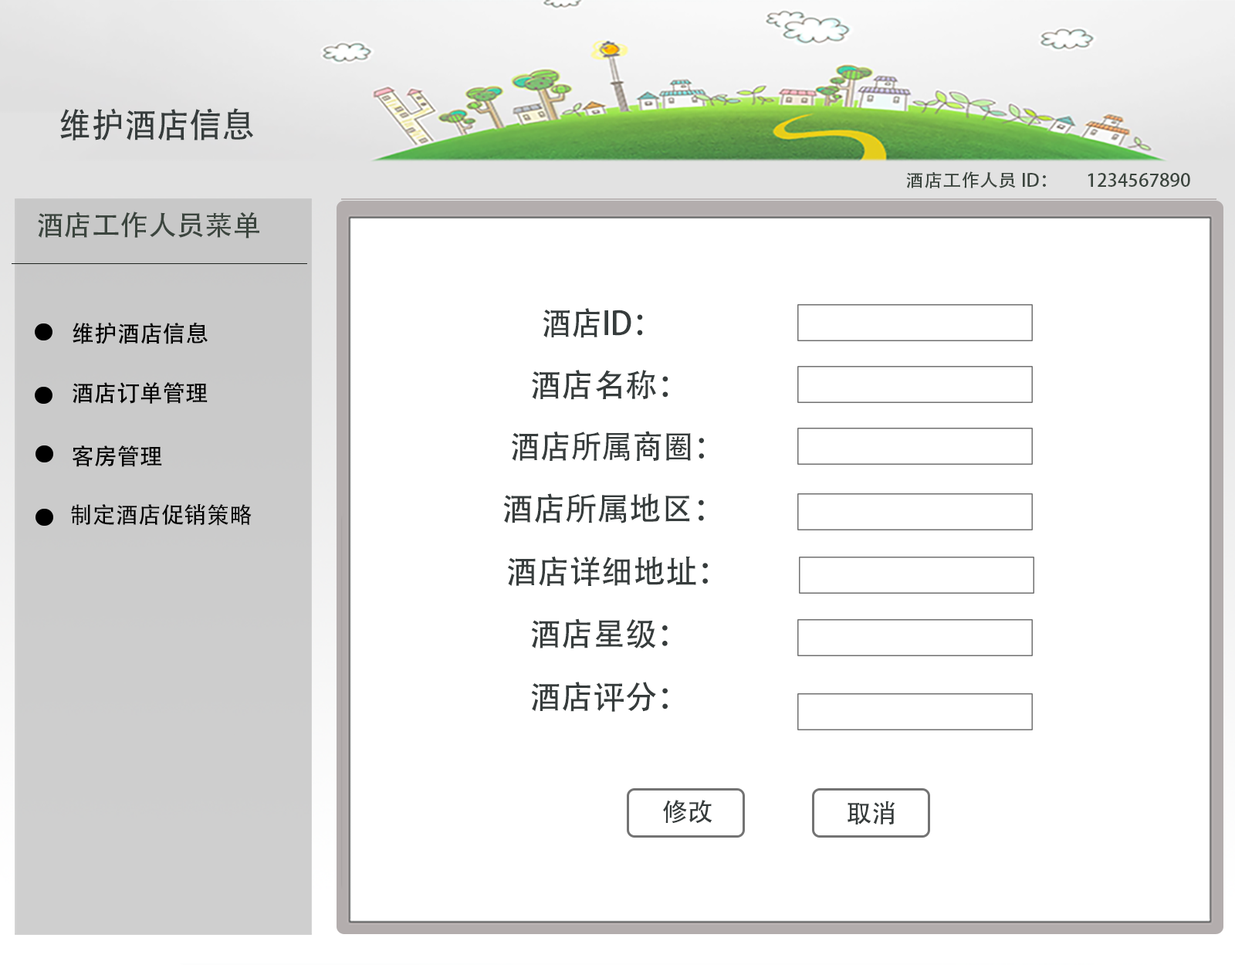
<style>
.page{position:relative;width:1235px;height:965px;background:#ffffff}
.page>*{position:absolute;margin:0}
.t1{font:34.3px "AdobeHeitiStd-Regular";letter-spacing:-0.005em;color:#363c3c;text-transform:uppercase;scale:0.96 1}
.t2{font:17.8px "AdobeHeitiStd-Regular";color:#3b453e;scale:1.04 1}
.t3{font:28.1px "AdobeHeitiStd-Regular";color:#3b453e}
.t4{font:32.2px "AdobeHeitiStd-Regular";letter-spacing:-0.005em;color:#363c3c;text-transform:uppercase;scale:0.96 1}
.t5{font:22.8px "AdobeHeitiStd-Regular";color:#010101}
.t6{font:32.2px "AdobeHeitiStd-Regular";letter-spacing:-0.005em;color:#363c3c;text-transform:uppercase}
.t7{font:22.8px "AdobeHeitiStd-Regular";color:#000000}
.t8{font:22.8px "AdobeHeitiStd-Regular";letter-spacing:-0.005em;color:#000000;text-transform:uppercase}
</style>
<div class="page">
<p class="t1" style="left:60px;top:108px;width:193px;height:33px">维护酒店信息</p>
<p class="t2" style="left:907px;top:171px;width:284px;height:17px">酒店工作人员ID：        1234567890</p>
<p class="t3" style="left:38px;top:212px;width:221px;height:27px">酒店工作人员菜单</p>
<p class="t4" style="left:543px;top:308px;width:100px;height:30px">酒店ID：</p>
<p class="t5" style="left:73px;top:322px;width:135px;height:22px">维护酒店信息</p>
<p class="t6" style="left:532px;top:370px;width:137px;height:30px">酒店名称：</p>
<p class="t7" style="left:73px;top:382px;width:135px;height:22px">酒店订单管理</p>
<p class="t4" style="left:512px;top:431px;width:192px;height:30px">酒店所属商圈：</p>
<p class="t7" style="left:73px;top:446px;width:89px;height:21px">客房管理</p>
<p class="t6" style="left:503px;top:493px;width:201px;height:31px">酒店所属地区：</p>
<p class="t8" style="left:71px;top:504px;width:181px;height:22px">制定酒店促销策略</p>
<p class="t6" style="left:508px;top:556px;width:200px;height:30px">酒店详细地址：</p>
<p class="t6" style="left:531px;top:618px;width:137px;height:31px">酒店星级：</p>
<p class="t6" style="left:531px;top:682px;width:137px;height:30px">酒店评分：</p>
</div>
